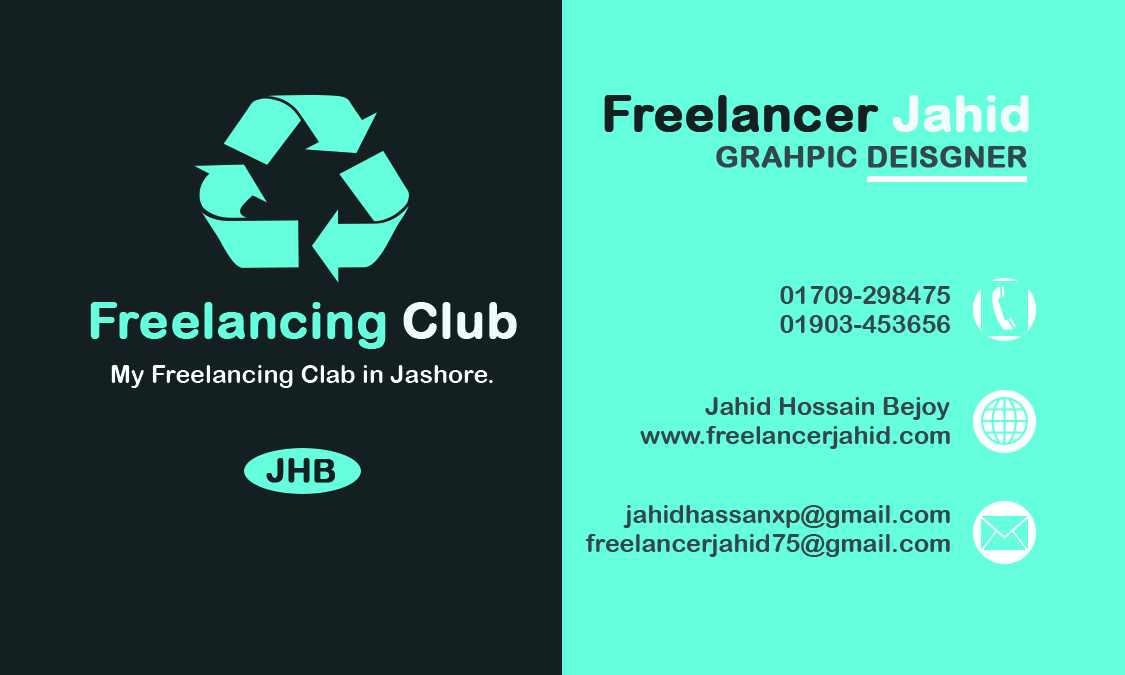
<style>
.page{position:relative;width:1125px;height:675px;background:#65ffdd}
.page>*{position:absolute;margin:0}
.t1{font:50px "ArialRoundedMTBold";color:#131f20;font-weight:bold}
.t2{font:50px "ArialRoundedMTBold";color:#f3fcfc;font-weight:bold}
.t3{font:29.2px "ArialRoundedMTBold";color:#34464b;font-weight:bold}
.t4{font:25px "ArialRoundedMTBold";color:#34464b;text-transform:uppercase}
.t5{font:50px "ArialRoundedMTBold";color:#65ffdd;font-weight:bold}
.t6{font:25px "ArialRoundedMTBold";color:#feffff}
.t7{font:25px "ArialRoundedMTBold";color:#34464b}
.t8{font:33.3px "ArialRoundedMTBold";color:#131f20;font-weight:bold}
</style>
<div class="page">
<p class="t1" style="left:604px;top:95px;width:425px;height:37px">Freelancer <span class="t2">Jahid</span></p>
<p class="t3" style="left:716px;top:146px;width:311px;height:22px">GRAHPIC DEISGNER</p>
<p class="t4" style="left:780px;top:286px;width:170px;height:18px">01709-298475</p>
<p class="t5" style="left:90px;top:302px;width:427px;height:47px">Freelancing <span class="t2">Club</span></p>
<p class="t4" style="left:780px;top:315px;width:170px;height:18px">01903-453656</p>
<p class="t6" style="left:111px;top:365px;width:382px;height:23px">My Freelancing Clab in Jashore.</p>
<p class="t7" style="left:705px;top:397px;width:245px;height:23px">Jahid Hossain Bejoy</p>
<p class="t7" style="left:640px;top:426px;width:310px;height:23px">www.freelancerjahid.com</p>
<p class="t8" style="left:266px;top:458px;width:69px;height:25px">JHB</p>
<p class="t7" style="left:623px;top:505px;width:327px;height:23px">jahidhassanxp@gmail.com</p>
<p class="t7" style="left:585px;top:534px;width:365px;height:23px">freelancerjahid75@gmail.com</p>
</div>
